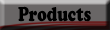
<style>
.page{position:relative;width:110px;height:30px;background:#696666}
.page>*{position:absolute;margin:0}
.t1{font:20px "CooperBlackStd";color:#000000;scale:0.75 1}
</style>
<div class="page">
<p class="t1" style="left:18px;top:6px;width:73px;height:16px">Products</p>
</div>
